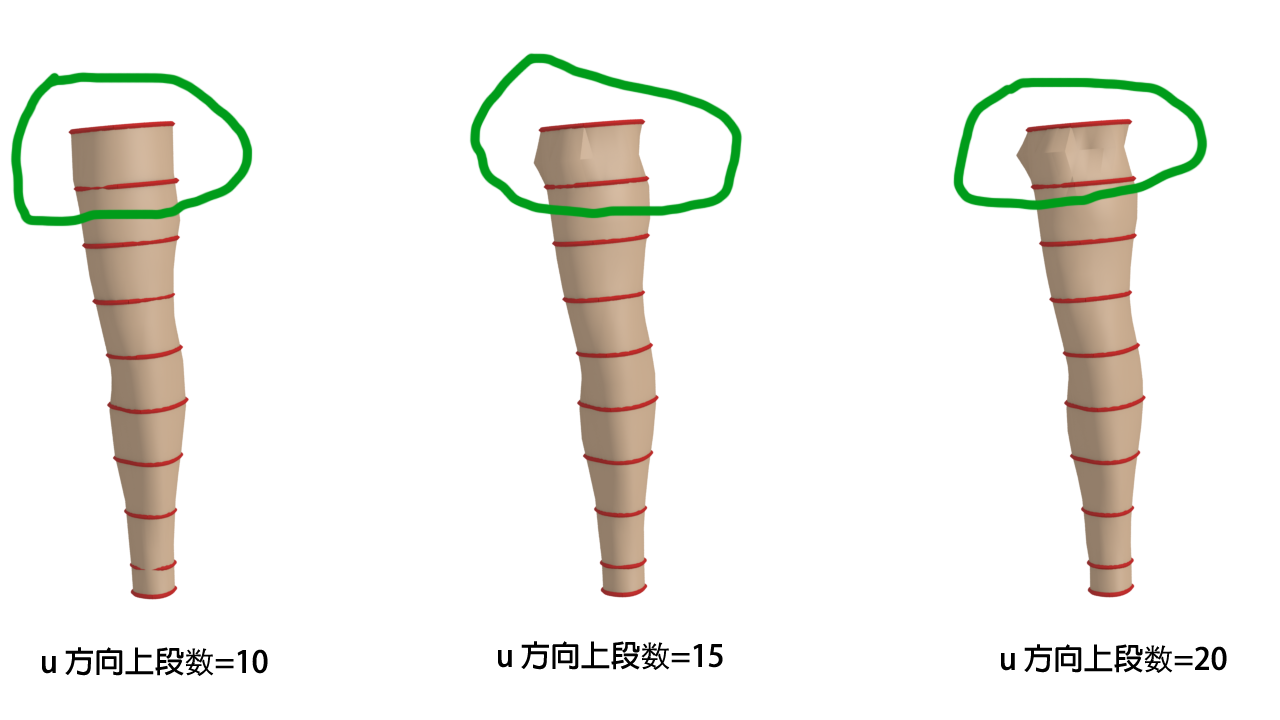
<style>
.page{position:relative;width:1280px;height:720px;background:#ffffff}
.page>*{position:absolute;margin:0}
.t1{font:30px "AdobeFanHeitiStd-Bold";color:#000000}
.t2{font:30px "STHeitiTC-Light";color:#000000}
</style>
<div class="page">
<p class="t1" style="left:498px;top:641px;width:225px;height:29px">u 方向上段<span class="t2">数</span>=15</p>
<p class="t1" style="left:42px;top:647px;width:226px;height:29px">u 方向上段<span class="t2">数</span>=10</p>
<p class="t1" style="left:1001px;top:644px;width:226px;height:29px">u 方向上段<span class="t2">数</span>=20</p>
</div>
